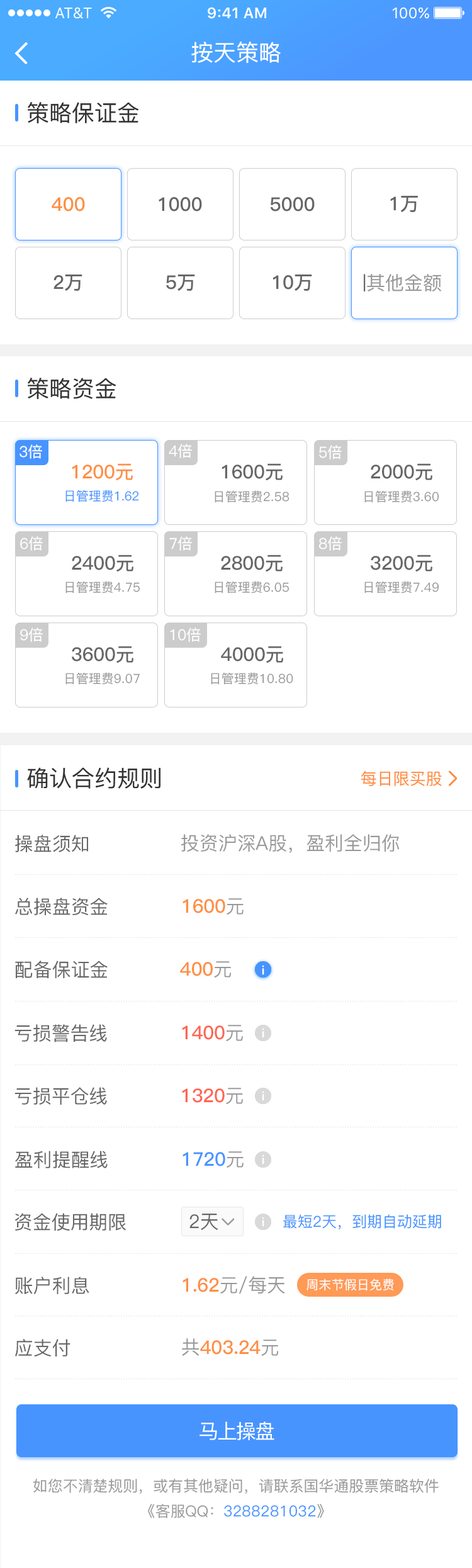
<style>
.page{position:relative;width:472px;height:1568px;background:#ffffff}
.page>*{position:absolute;margin:0}
.t1{font:22.7px "PingFang-SC-Medium";color:#ffffff}
.t2{font:22.7px "PingFang-SC-Medium";color:#333333}
.t3{font:18.9px "PingFang-SC-Bold";color:#ff8e42}
.t4{font:18.9px "PingFang-SC-Bold";color:#666666}
.t5{font:18.9px "PingFang-SC-Medium";color:#666666}
.t6{font:18.9px "PingFang-SC-Medium";color:#999999}
.t7{font:15.1px "PingFang-SC-Medium";color:#ffffff}
.t8{font:12.6px "PingFang-SC-Medium";color:#4794ff}
.t9{font:12.6px "PingFang-SC-Medium";color:#999999}
.t10{font:16.4px "PingFang-SC-Medium";color:#ff8e42}
.t11{font:18.9px "PingFang-SC-Bold";color:#ff6552}
.t12{font:18.9px "PingFang-SC-Bold";color:#4794ff}
.t13{font:15.1px "PingFang-SC-Medium";color:#4794ff}
.t14{font:12.6px "PingFang-SC-Medium";color:#ffffff}
.t15{font:20.1px "PingFang-SC-Medium";letter-spacing:-0.06em;color:#ffffff}
.t16{font:15.1px/25.2px "PingFang-SC-Medium";color:#999999}
.t17{font:15.1px/25.2px "PingFang-SC-Medium";color:#4794ff}
</style>
<div class="page">
<p class="t1" style="left:191px;top:42px;width:90px;height:21px">按天策略</p>
<p class="t2" style="left:28px;top:102px;width:111px;height:21px">策略保证金</p>
<p class="t3" style="left:52px;top:197px;width:33px;height:15px">400</p>
<p class="t4" style="left:159px;top:197px;width:43px;height:15px">1000</p>
<p class="t4" style="left:271px;top:197px;width:44px;height:15px">5000</p>
<p class="t4" style="left:390px;top:196px;width:28px;height:16px">1万</p>
<p class="t4" style="left:54px;top:274px;width:28px;height:17px">2万</p>
<p class="t4" style="left:166px;top:274px;width:29px;height:17px">5万</p>
<p class="t4" style="left:273px;top:274px;width:39px;height:17px">10万</p>
<p class="t5" style="left:364px;top:274px;width:2px;height:17px">丨</p>
<p class="t6" style="left:367px;top:274px;width:74px;height:17px">其他金额</p>
<p class="t2" style="left:28px;top:378px;width:88px;height:21px">策略资金</p>
<p class="t7" style="left:20px;top:444px;width:22px;height:15px">3倍</p>
<p class="t7" style="left:169px;top:444px;width:23px;height:14px">4倍</p>
<p class="t7" style="left:319px;top:445px;width:23px;height:15px">5倍</p>
<p class="t3" style="left:72px;top:463px;width:61px;height:17px">1200元</p>
<p class="t4" style="left:222px;top:463px;width:61px;height:17px">1600元</p>
<p class="t4" style="left:371px;top:463px;width:61px;height:17px">2000元</p>
<p class="t8" style="left:65px;top:490px;width:74px;height:12px">日管理费1.62</p>
<p class="t9" style="left:215px;top:490px;width:75px;height:13px">日管理费2.58</p>
<p class="t9" style="left:364px;top:490px;width:75px;height:13px">日管理费3.60</p>
<p class="t7" style="left:20px;top:536px;width:23px;height:15px">6倍</p>
<p class="t7" style="left:169px;top:536px;width:23px;height:15px">7倍</p>
<p class="t7" style="left:319px;top:536px;width:23px;height:15px">8倍</p>
<p class="t4" style="left:72px;top:555px;width:61px;height:17px">2400元</p>
<p class="t4" style="left:221px;top:555px;width:62px;height:17px">2800元</p>
<p class="t4" style="left:371px;top:555px;width:61px;height:17px">3200元</p>
<p class="t9" style="left:65px;top:581px;width:75px;height:13px">日管理费4.75</p>
<p class="t9" style="left:215px;top:581px;width:75px;height:13px">日管理费6.05</p>
<p class="t9" style="left:364px;top:581px;width:75px;height:13px">日管理费7.49</p>
<p class="t7" style="left:20px;top:628px;width:23px;height:14px">9倍</p>
<p class="t7" style="left:170px;top:628px;width:31px;height:14px">10倍</p>
<p class="t4" style="left:72px;top:646px;width:61px;height:17px">3600元</p>
<p class="t4" style="left:221px;top:646px;width:62px;height:17px">4000元</p>
<p class="t9" style="left:65px;top:672px;width:75px;height:13px">日管理费9.07</p>
<p class="t9" style="left:211px;top:672px;width:82px;height:13px">日管理费10.80</p>
<p class="t2" style="left:27px;top:767px;width:134px;height:22px">确认合约规则</p>
<p class="t10" style="left:361px;top:770px;width:81px;height:16px">每日限买股</p>
<p class="t5" style="left:15px;top:835px;width:73px;height:17px">操盘须知</p>
<p class="t6" style="left:181px;top:834px;width:219px;height:19px">投资沪深A股，盈利全归你</p>
<p class="t5" style="left:15px;top:898px;width:93px;height:17px">总操盘资金</p>
<p class="t3" style="left:183px;top:898px;width:61px;height:17px">1600<span class="t6">元</span></p>
<p class="t5" style="left:15px;top:961px;width:93px;height:17px">配备保证金</p>
<p class="t3" style="left:180px;top:961px;width:52px;height:17px">400<span class="t6">元</span></p>
<p class="t5" style="left:14px;top:1024px;width:93px;height:18px">亏损警告线</p>
<p class="t11" style="left:182px;top:1025px;width:61px;height:16px">1400<span class="t6">元</span></p>
<p class="t5" style="left:14px;top:1087px;width:93px;height:18px">亏损平仓线</p>
<p class="t11" style="left:182px;top:1088px;width:61px;height:16px">1320<span class="t6">元</span></p>
<p class="t5" style="left:15px;top:1151px;width:93px;height:17px">盈利提醒线</p>
<p class="t12" style="left:183px;top:1151px;width:61px;height:17px">1720<span class="t6">元</span></p>
<p class="t5" style="left:14px;top:1213px;width:112px;height:18px">资金使用期限</p>
<p class="t5" style="left:189px;top:1214px;width:29px;height:16px">2天</p>
<p class="t13" style="left:283px;top:1214px;width:158px;height:15px">最短2天，到期自动延期</p>
<p class="t5" style="left:15px;top:1277px;width:74px;height:17px">账户利息</p>
<p class="t3" style="left:183px;top:1276px;width:102px;height:18px">1.62<span class="t6">元/每天</span></p>
<p class="t14" style="left:307px;top:1278px;width:87px;height:13px">周末节假日免费</p>
<p class="t5" style="left:15px;top:1339px;width:56px;height:17px">应支付</p>
<p class="t3" style="left:182px;top:1338px;width:97px;height:18px"><span class="t6">共</span>403.24<span class="t6">元</span></p>
<p class="t15" style="left:200px;top:1421px;width:74px;height:19px">马上操盘</p>
<p class="t16" style="left:33px;top:1479px;width:406px;height:39px;text-align:center">如您不清楚规则，或有其他疑问，请联系国华通股票策略软件<br>《客服QQ：<span class="t17">3288281032</span>》</p>
</div>
